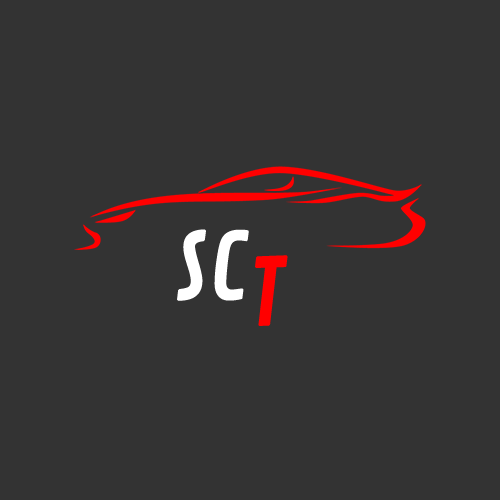
<style>
.page{position:relative;width:500px;height:500px;background:#333333}
.page>*{position:absolute;margin:0}
.t1{font:91.7px "ContrailOne-Regular";letter-spacing:0.025em;color:#ffffff}
.t2{font:91.7px "ContrailOne-Regular";letter-spacing:0.025em;color:#ff0000}
</style>
<div class="page">
<p class="t1" style="left:177px;top:229px;width:72px;height:72px">SC</p>
<p class="t2" style="left:255px;top:255px;width:33px;height:71px">T</p>
</div>
